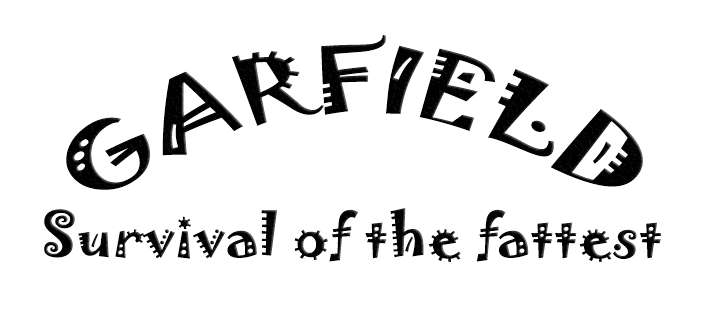
<style>
.page{position:relative;width:709px;height:311px;background:#ffffff}
.page>*{position:absolute;margin:0}
.t1{font:84px/36.9px "Jokerman-Regular";color:#000000;scale:1.09 1}
.t2{font:54px "Jokerman-Regular";color:#000000;scale:1.09 1}
</style>
<div class="page">
<p class="t1" style="left:66px;top:35px;width:577px;height:155px;text-align:center">GARFIELD</p>
<p class="t2" style="left:44px;top:208px;width:618px;height:54px">Survival of the fattest</p>
</div>
